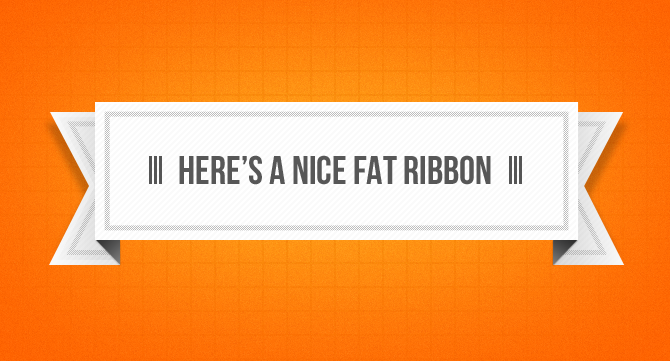
<style>
.page{position:relative;width:670px;height:361px}
.page>*{position:absolute;margin:0}
.t1{font:40px "BebasNeue";color:#555555}
</style>
<div class="page">
<p class="t1" style="left:179px;top:155px;width:312px;height:30px">Here’s a nice fat ribbon</p>
</div>
